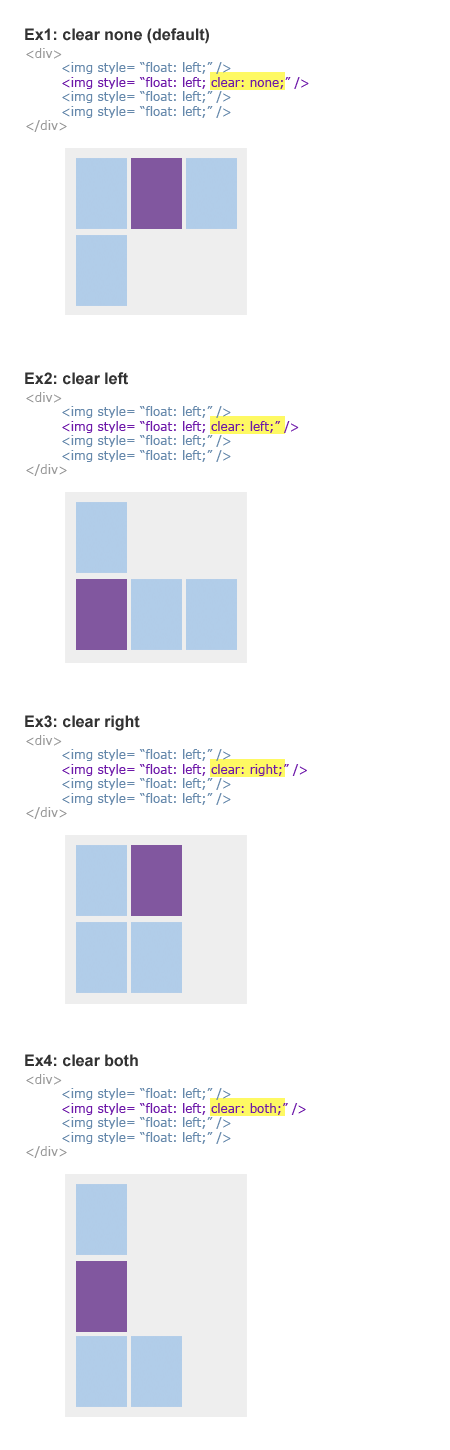
<style>
.page{position:relative;width:450px;height:1450px;background:#ffffff}
.page>*{position:absolute;margin:0}
.t1{font:16px "Arial-BoldMT";color:#333333}
.t2{font:12px "Verdana";color:#6588ab}
.t3{font:12px "Verdana";color:#999999}
.t4{font:12px "Verdana";color:#6d18a9}
</style>
<div class="page">
<p class="t1" style="left:25px;top:28px;width:184px;height:16px">Ex1: clear none (default)</p>
<p class="t2" style="left:26px;top:48px;width:283px;height:84px"><span class="t3">&lt;div&gt;<br> </span>&lt;img style= “float: left;” /&gt;<br> <span class="t4">&lt;img style= “float: left; clear: none;” /&gt;<br> </span>&lt;img style= “float: left;” /&gt;<br> &lt;img style= “float: left;” /&gt;<br><span class="t3">&lt;/div&gt;</span></p>
<p class="t1" style="left:25px;top:372px;width:103px;height:13px">Ex2: clear left</p>
<p class="t2" style="left:26px;top:392px;width:273px;height:84px"><span class="t3">&lt;div&gt;<br> </span>&lt;img style= “float: left;” /&gt;<br> <span class="t4">&lt;img style= “float: left; clear: left;” /&gt;<br> </span>&lt;img style= “float: left;” /&gt;<br> &lt;img style= “float: left;” /&gt;<br><span class="t3">&lt;/div&gt;</span></p>
<p class="t1" style="left:25px;top:715px;width:115px;height:16px">Ex3: clear right</p>
<p class="t2" style="left:26px;top:735px;width:281px;height:84px"><span class="t3">&lt;div&gt;<br> </span>&lt;img style= “float: left;” /&gt;<br> <span class="t4">&lt;img style= “float: left; clear: right;” /&gt;<br> </span>&lt;img style= “float: left;” /&gt;<br> &lt;img style= “float: left;” /&gt;<br><span class="t3">&lt;/div&gt;</span></p>
<p class="t1" style="left:25px;top:1054px;width:113px;height:13px">Ex4: clear both</p>
<p class="t2" style="left:26px;top:1074px;width:280px;height:84px"><span class="t3">&lt;div&gt;<br> </span>&lt;img style= “float: left;” /&gt;<br> <span class="t4">&lt;img style= “float: left; clear: both;” /&gt;<br> </span>&lt;img style= “float: left;” /&gt;<br> &lt;img style= “float: left;” /&gt;<br><span class="t3">&lt;/div&gt;</span></p>
</div>
